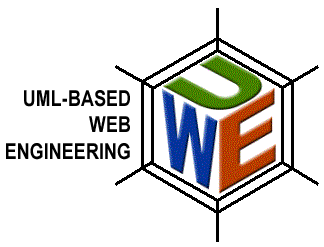
<style>
.page{position:relative;width:324px;height:247px;background:#ffffff}
.page>*{position:absolute;margin:0}
.t1{font:22px "ArialNarrow-Bold";color:#000000}
</style>
<div class="page">
<p class="t1" style="left:6px;top:90px;width:124px;height:70px;text-align:right">UML-BASED<br>WEB<br>ENGINEERING</p>
</div>
